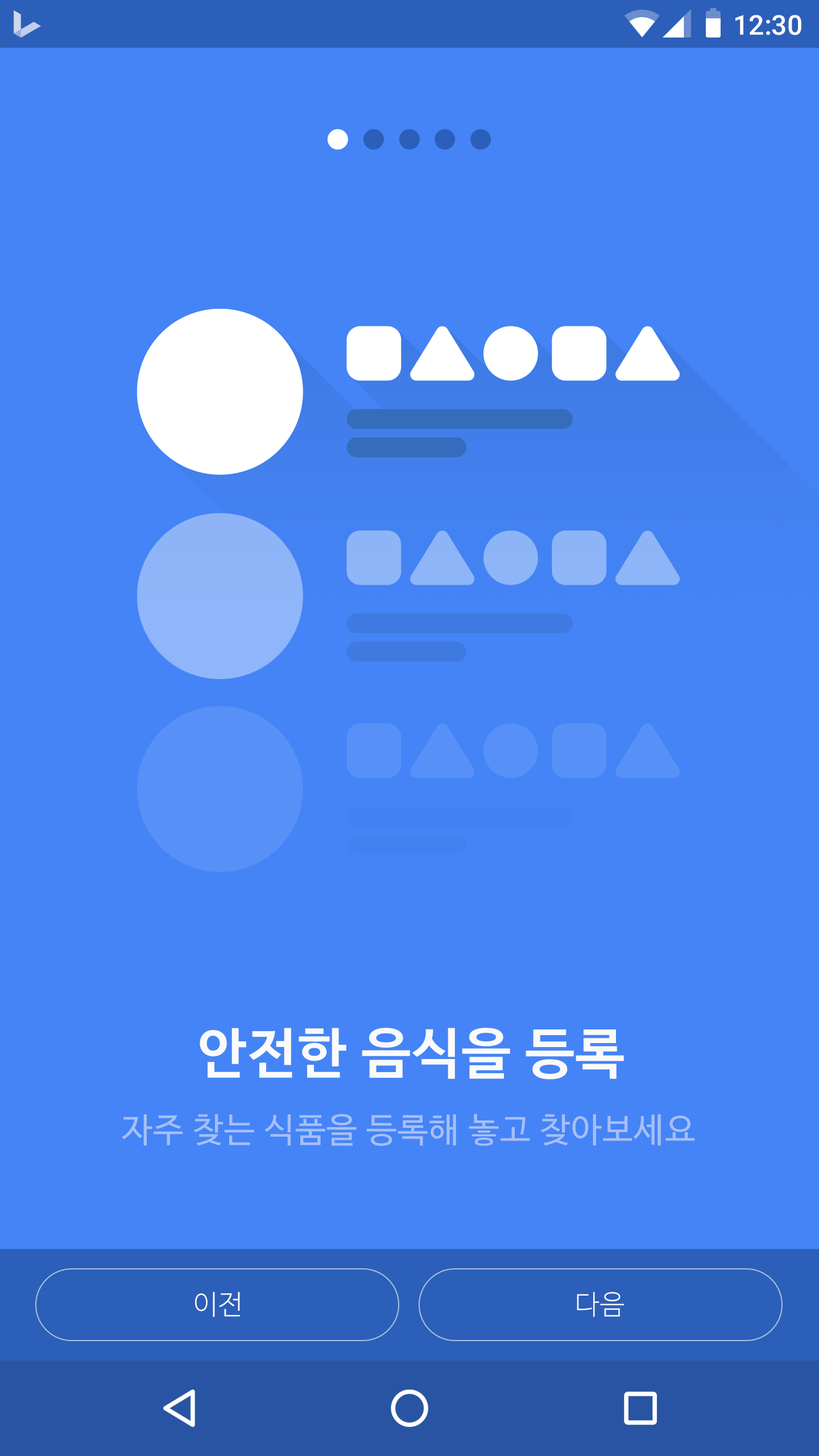
<style>
.page{position:relative;width:819px;height:1456px;background:#4484f6}
.page>*{position:absolute;margin:0}
.t1{font:27.3px "Roboto-Medium";color:#ffffff}
.t2{font:54.6px "NanumBarunGothicBold";letter-spacing:0.025em;color:#fafafa}
.t3{font:34.1px "NanumBarunGothic";letter-spacing:0.025em;color:#a6bff8}
.t4{font:27.3px "NanumBarunGothicLight";letter-spacing:0.025em;color:#fafafa}
</style>
<div class="page">
<p class="t1" style="left:735px;top:15px;width:66px;height:20px">12:30</p>
<p class="t2" style="left:200px;top:1028px;width:424px;height:51px">안전한 음식을 등록</p>
<p class="t3" style="left:122px;top:1114px;width:573px;height:32px">자주 찾는 식품을 등록해 놓고 찾아보세요</p>
<p class="t4" style="left:195px;top:1292px;width:45px;height:25px">이전</p>
<p class="t4" style="left:577px;top:1292px;width:47px;height:25px">다음</p>
</div>
